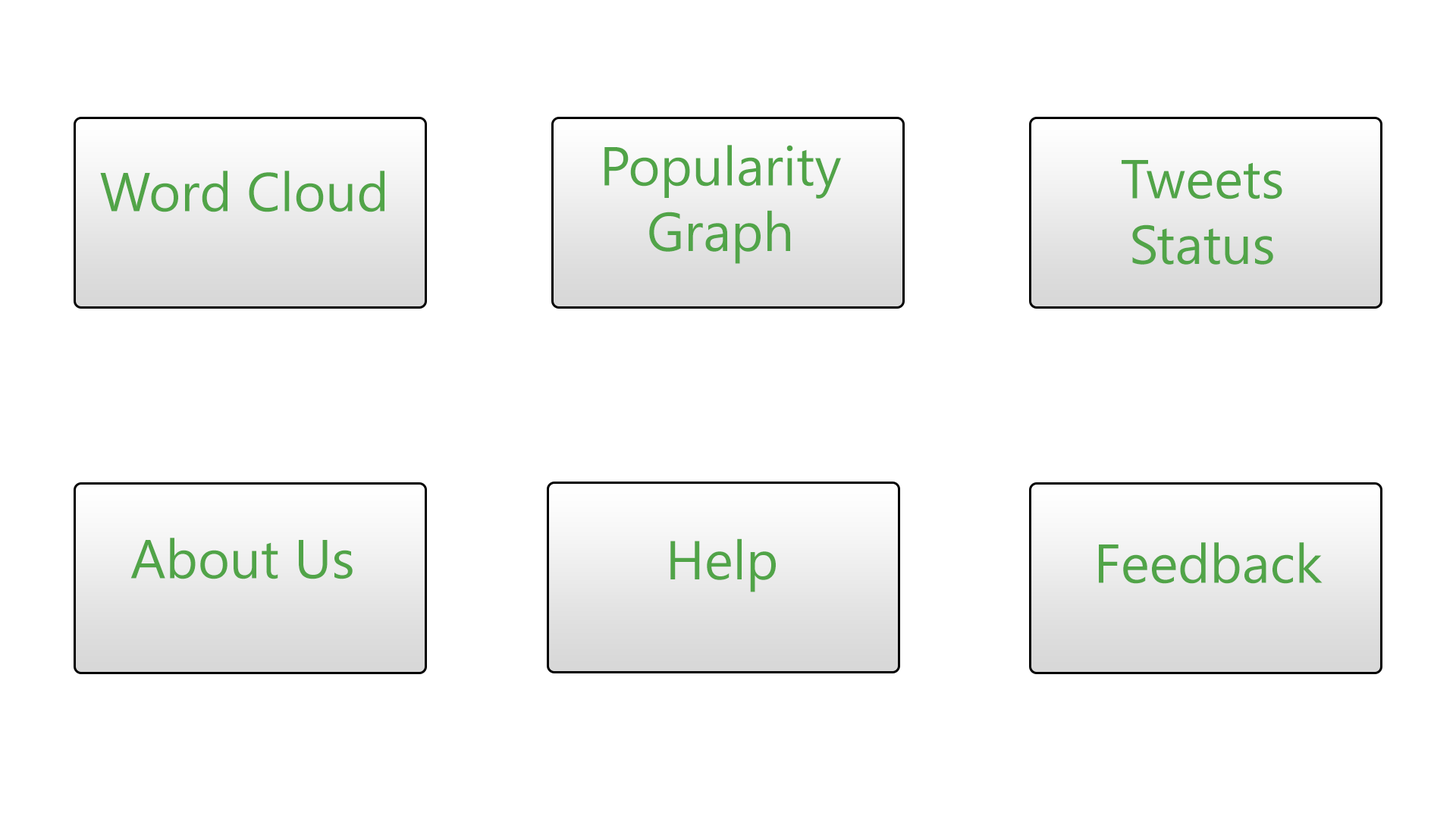
<style>
.page{position:relative;width:1456px;height:819px;background:#ffffff}
.page>*{position:absolute;margin:0}
.t1{font:54.6px "SegoeUI";color:#51a448}
</style>
<div class="page">
<p class="t1" style="left:604px;top:145px;width:237px;height:119px;text-align:center">Popularity<br>Graph</p>
<p class="t1" style="left:1122px;top:160px;width:160px;height:105px;text-align:center">Tweets<br>Status</p>
<p class="t1" style="left:100px;top:171px;width:284px;height:41px">Word Cloud</p>
<p class="t1" style="left:130px;top:538px;width:223px;height:41px">About Us</p>
<p class="t1" style="left:670px;top:538px;width:106px;height:54px">Help</p>
<p class="t1" style="left:1099px;top:542px;width:224px;height:42px">Feedback</p>
</div>
